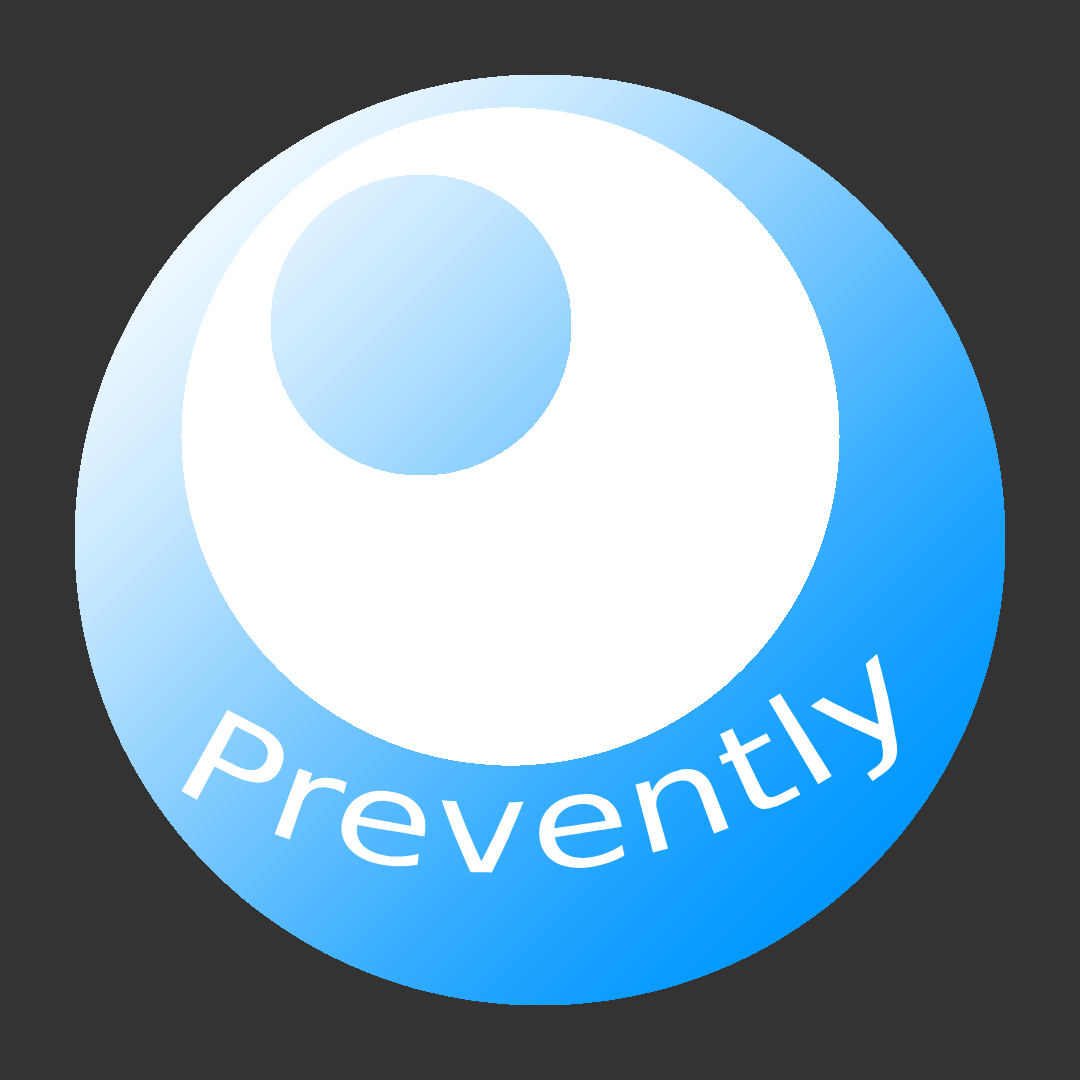
<style>
.page{position:relative;width:1080px;height:1080px;background:#333333}
.page>*{position:absolute;margin:0}
.t1{font:128px "DejaVuSans";color:#ffffff}
</style>
<div class="page">
<p class="t1" style="left:181px;top:653px;width:716px;height:220px;rotate:-6deg">Prevently</p>
</div>
